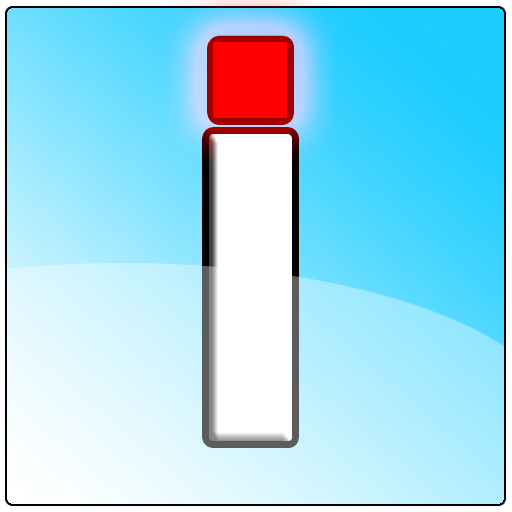
<style>
.page{position:relative;width:512px;height:512px}
.page>*{position:absolute;margin:0}
.t1{font:512px "PoplarStd";color:#ffffff}
</style>
<div class="page">
<p class="t1" style="left:209px;top:42px;width:83px;height:399px">i</p>
</div>
